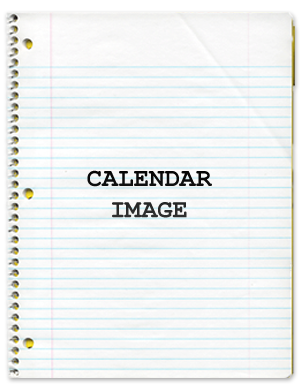
<style>
.page{position:relative;width:300px;height:389px}
.page>*{position:absolute;margin:0}
.t1{font:26px "CourierNewPS-BoldMT"}
</style>
<div class="page">
<p class="t1" style="left:87px;top:170px;width:125px;height:48px;text-align:center">CALENDAR<br>IMAGE</p>
</div>
